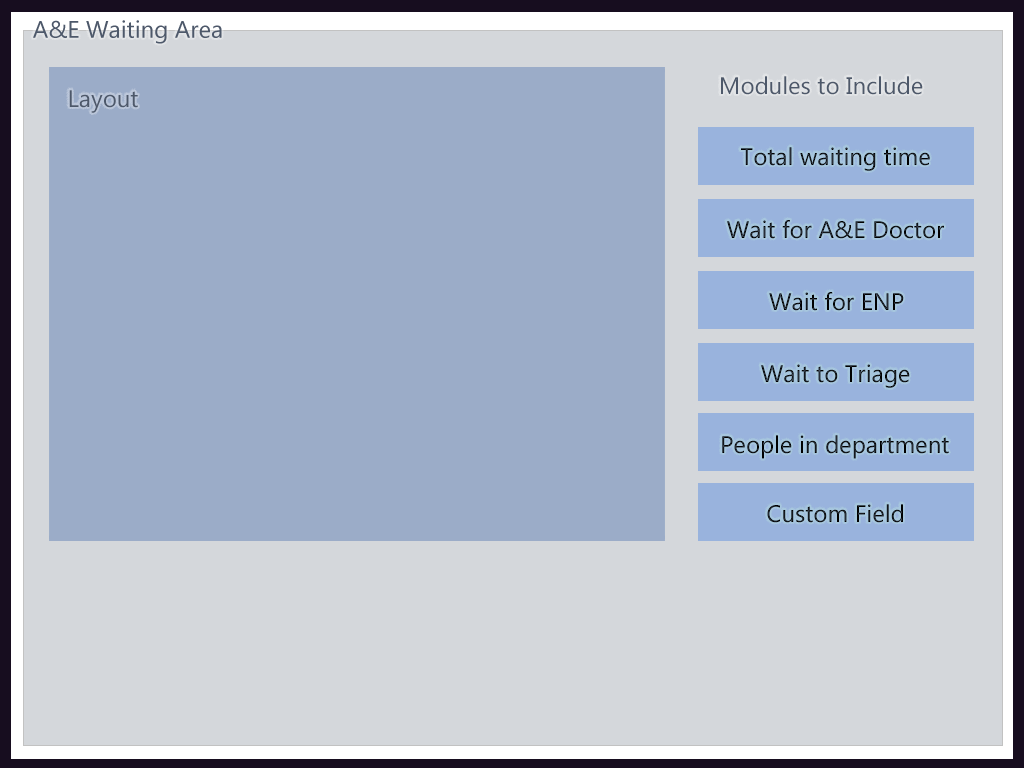
<style>
.page{position:relative;width:1024px;height:768px;background:#d4d7db}
.page>*{position:absolute;margin:0}
.t1{font:24px "MicrosoftNewTaiLue";color:#4d586a}
.t2{font:24px "MicrosoftNewTaiLue"}
.t3{font:24px "MicrosoftNewTaiLue";color:#050607}
</style>
<div class="page">
<p class="t1" style="left:721px;top:76px;width:202px;height:19px">Modules to Include</p>
<p class="t1" style="left:69px;top:90px;width:69px;height:23px">Layout</p>
<p class="t2" style="left:741px;top:147px;width:189px;height:24px">Total waiting time</p>
<p class="t2" style="left:727px;top:220px;width:217px;height:19px">Wait for A&amp;E Doctor</p>
<p class="t3" style="left:769px;top:292px;width:135px;height:19px">Wait for ENP</p>
<p class="t2" style="left:761px;top:364px;width:149px;height:24px">Wait to Triage</p>
<p class="t2" style="left:722px;top:435px;width:227px;height:24px">People in department</p>
<p class="t2" style="left:767px;top:504px;width:136px;height:19px">Custom Field</p>
</div>
